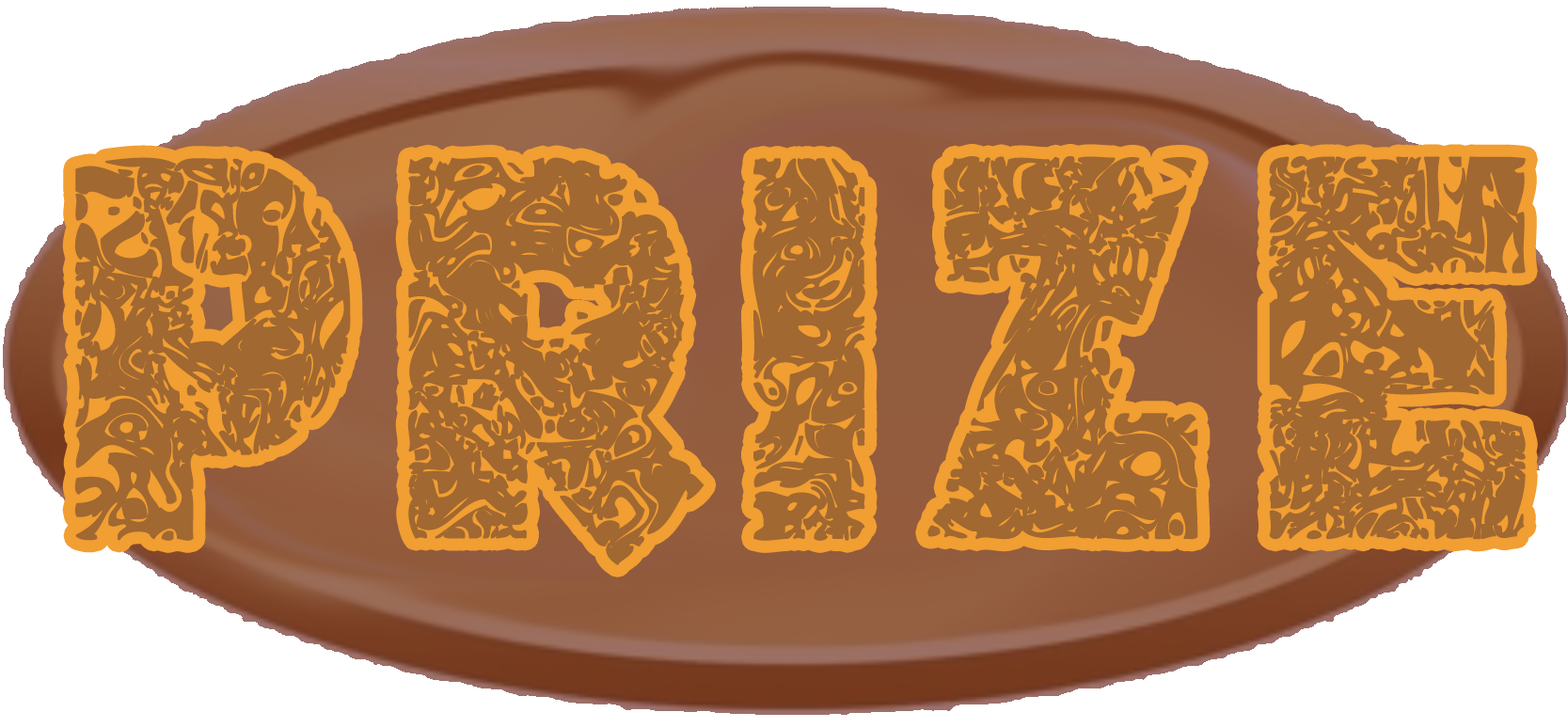
<style>
.page{position:relative;width:1568px;height:728px;background:#ffffff}
.page>*{position:absolute;margin:0}
.t1{font:525.6px "DecoNeueWilde";letter-spacing:0.05em;color:#a16831;font-weight:bold;scale:0.83 1}
</style>
<div class="page">
<p class="t1" style="left:74px;top:156px;width:1452px;height:409px">PRIZE</p>
</div>
